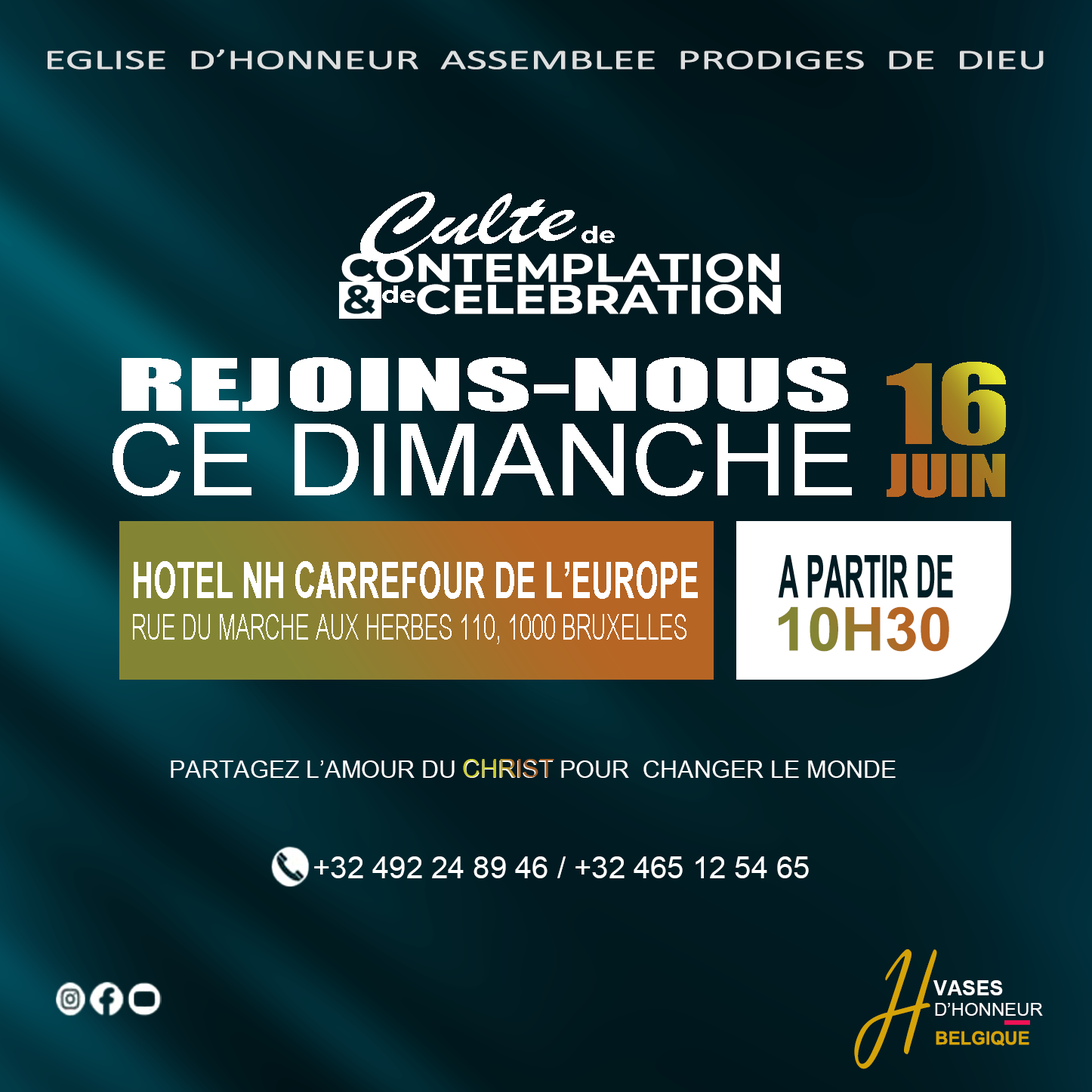
<style>
.page{position:relative;width:1092px;height:1092px}
.page>*{position:absolute;margin:0}
.t1{font:28.4px "Calibri";color:#dddfdf;scale:1.6 1}
.t2{font:83.6px "BrushScriptMT";color:#ffffff;scale:1.5 1}
.t3{font:22.7px "Montserrat-Bold";color:#ffffff;scale:1.16 1}
.t4{font:39.8px "Montserrat-Bold";color:#ffffff;scale:1.19 1}
.t5{font:41px "Montserrat-Bold";color:#ffffff;scale:1.19 1}
.t6{font:67.1px "Impact";color:#ffffff;scale:1.95 1}
.t7{font:54.4px/95.2px "Impact";color:#ab7624;scale:1.32 1}
.t8{font:102.2px/95.2px "Impact";color:#ab7624;scale:1.32 1}
.t9{font:99.7px "ArialMT";color:#ffffff;scale:1.07 1}
.t10{font:49.6px "Arial-BoldMT";color:#ffffff;scale:0.61 1}
.t11{font:35.4px "ArialNarrow";color:#ffffff;scale:0.72 1}
.t12{font:60.4px "Arial-BoldMT"}
.t13{font:24.4px "ArialNarrow";color:#ffffff;scale:1.21 1}
.t14{font:25px "ArialNarrow";scale:1.21 1}
.t15{font:30.2px "ArialMT";color:#ffffff}
.t16{font:145.9px "VladimirScript";color:#d5a309;scale:0.61 1}
.t17{font:20.7px "Arial-BoldMT";color:#ffffff}
.t18{font:18.1px "ArialMT";color:#ffffff}
.t19{font:18.1px "Arial-BoldMT";color:#d5a309}
</style>
<div class="page">
<p class="t1" style="left:48px;top:49px;width:996px;height:20px">EGLISE  D’HONNEUR  ASSEMBLEE  PRODIGES  DE  DIEU</p>
<p class="t2" style="left:360px;top:192px;width:216px;height:69px;rotate:-3deg">Culte</p>
<p class="t3" style="left:581px;top:226px;width:34px;height:17px">de</p>
<p class="t4" style="left:341px;top:253px;width:438px;height:29px">CONTEMPLATION</p>
<p class="t3" style="left:382px;top:285px;width:33px;height:18px">de</p>
<p class="t5" style="left:417px;top:284px;width:364px;height:31px">CELEBRATION</p>
<p class="t6" style="left:122px;top:357px;width:726px;height:55px">REJOINS-NOUS</p>
<p class="t7" style="left:887px;top:362px;width:119px;height:136px"><span class="t8">16<br></span>JUIN</p>
<p class="t9" style="left:113px;top:423px;width:739px;height:73px">CE DIMANCHE</p>
<p class="t10" style="left:134px;top:561px;width:564px;height:38px">HOTEL NH CARREFOUR DE L’EUROPE</p>
<p class="t11" style="left:133px;top:614px;width:553px;height:30px">RUE DU MARCHE AUX HERBES 110, 1000 BRUXELLES</p>
<p class="t12" style="left:779px;top:606px;width:170px;height:46px">10H30</p>
<p class="t13" style="left:171px;top:760px;width:725px;height:18px">PARTAGEZ L’AMOUR DU CHRIST POUR  CHANGER LE MONDE</p>
<p class="t14" style="left:463px;top:759px;width:91px;height:18px">CHRIST</p>
<p class="t15" style="left:314px;top:856px;width:495px;height:22px">+32 492 24 89 46 / +32 465 12 54 65</p>
<p class="t16" style="left:854px;top:949px;width:83px;height:120px;rotate:-11deg">H</p>
<p class="t17" style="left:933px;top:980px;width:70px;height:15px">VASES</p>
<p class="t18" style="left:935px;top:1003px;width:108px;height:13px">D’HONNEUR</p>
<p class="t19" style="left:936px;top:1031px;width:93px;height:15px">BELGIQUE</p>
</div>
